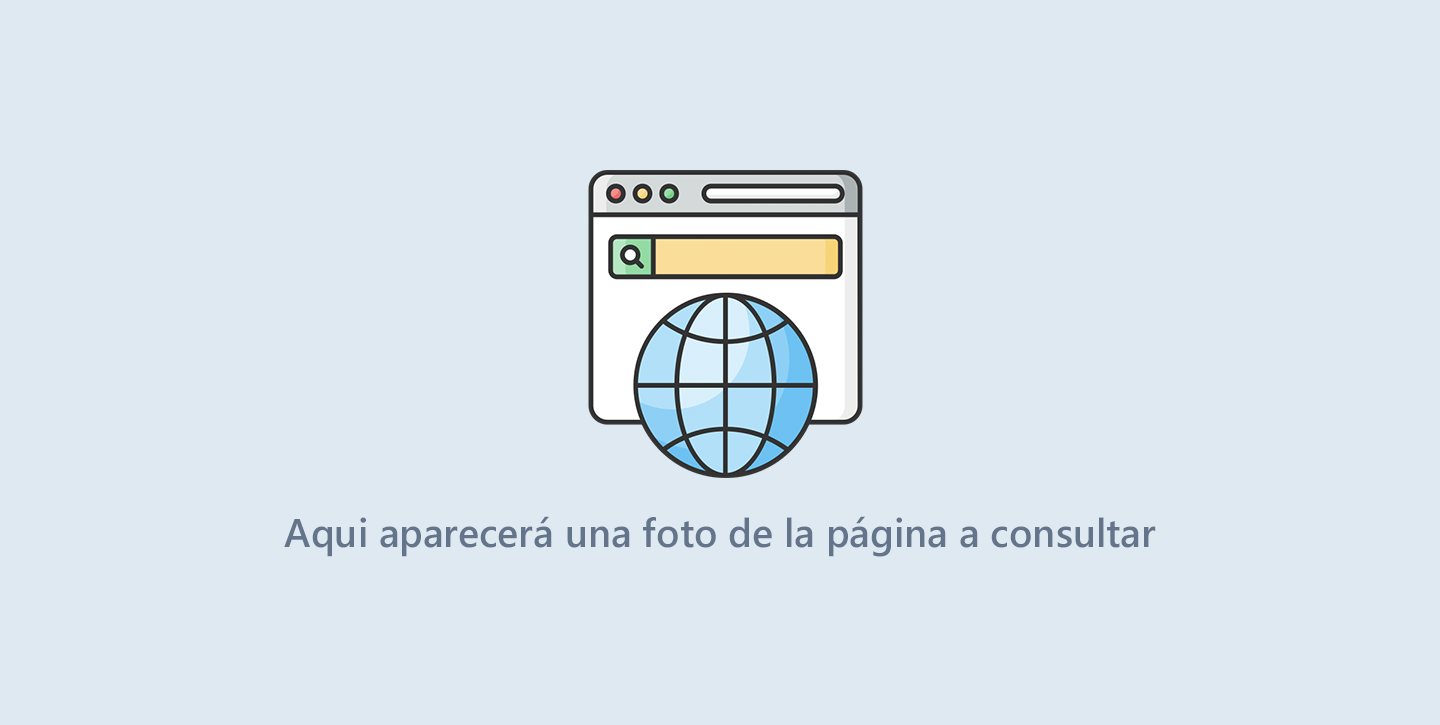
<style>
.page{position:relative;width:1440px;height:725px;background:#dfe9f1}
.page>*{position:absolute;margin:0}
.t1{font:40px "SegoeUI-Semibold";color:#64748b}
</style>
<div class="page">
<p class="t1" style="left:284px;top:516px;width:872px;height:41px">Aqui aparecerá una foto de la página a consultar</p>
</div>
